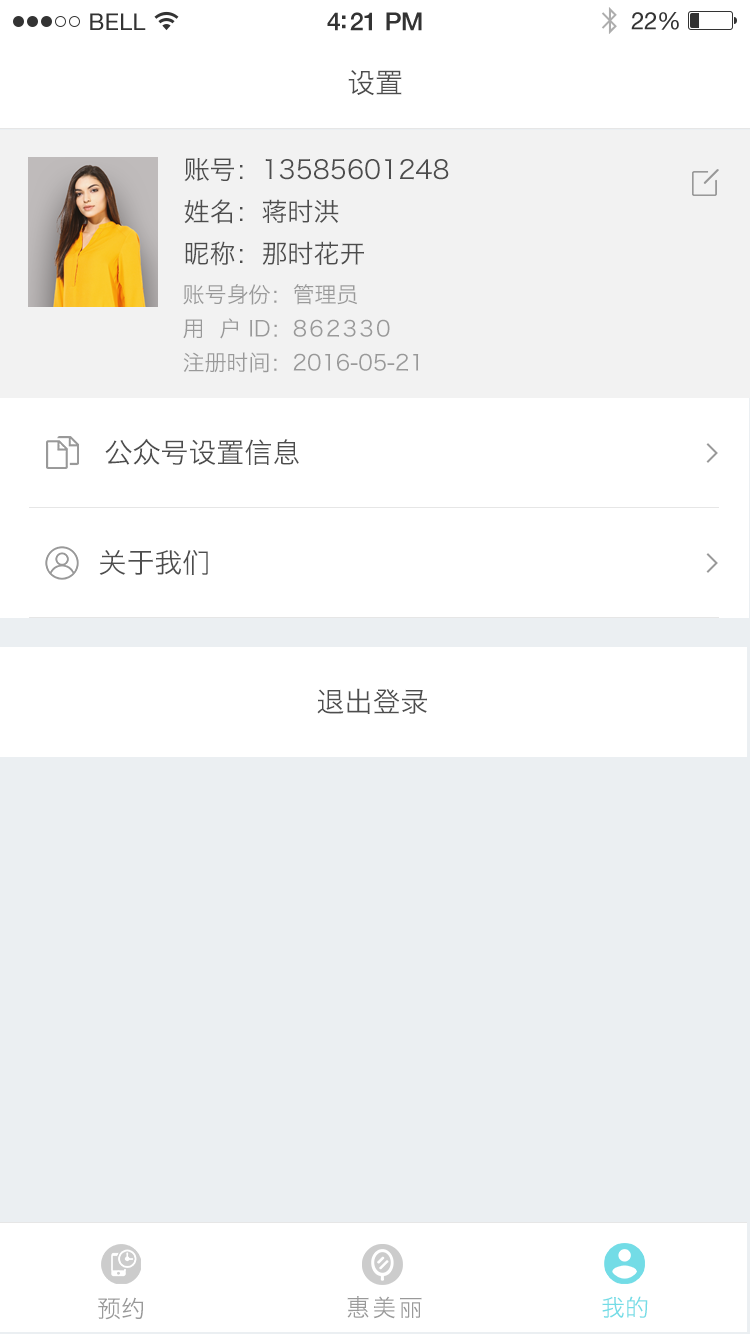
<style>
.page{position:relative;width:750px;height:1334px;background:#ffffff}
.page>*{position:absolute;margin:0}
.t1{font:28px "HiraginoSansGB-W3";color:#4d4d4d}
.t2{font:26px/42px "HiraginoSansGB-W3";color:#4c4c4c}
.t3{font:22px/34px "HiraginoSansGB-W3";color:#999999}
.t4{font:22px "HiraginoSansGB-W3";letter-spacing:0.1em;color:#999999}
.t5{font:24px "HiraginoSansGB-W3";color:#999999}
.t6{font:24px "HiraginoSansGB-W3";letter-spacing:0.1em;color:#999999}
.t7{font:24px "HiraginoSansGB-W3";color:#73dce6}
</style>
<div class="page">
<p class="t1" style="left:348px;top:70px;width:54px;height:26px">设置</p>
<p class="t2" style="left:184px;top:158px;width:265px;height:108px;text-align:justify">账号：13585601248<br>姓名：蒋时洪<br>昵称：那时花开</p>
<p class="t3" style="left:183px;top:284px;width:236px;height:89px;text-align:justify">账号身份：管理员<br>用  户 ID：<span class="t4">862330<br></span>注册时间：2016-05-21</p>
<p class="t1" style="left:105px;top:438px;width:194px;height:27px">公众号设置信息</p>
<p class="t1" style="left:99px;top:550px;width:109px;height:25px">关于我们</p>
<p class="t1" style="left:317px;top:688px;width:110px;height:26px">退出登录</p>
<p class="t5" style="left:98px;top:1297px;width:46px;height:23px">预约</p>
<p class="t6" style="left:347px;top:1296px;width:75px;height:23px">惠美丽</p>
<p class="t7" style="left:602px;top:1296px;width:46px;height:22px">我的</p>
</div>
